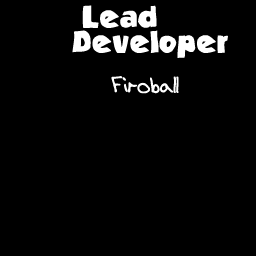
<style>
.page{position:relative;width:256px;height:256px;background:#000000}
.page>*{position:absolute;margin:0}
.t1{font:23px/21px "StrandedBRK";letter-spacing:0.03em;color:#ffffff}
.t2{font:25px/40px "AEnigmaScrawl4BRK";color:#ffffff}
</style>
<div class="page">
<p class="t1" style="left:72px;top:5px;width:156px;height:89px;text-align:center">Lead              <br>     Developer<br>     <span class="t2">Firoball</span></p>
</div>
